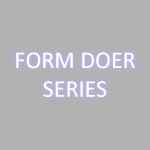
<style>
.page{position:relative;width:150px;height:150px;background:#b2b2b2}
.page>*{position:absolute;margin:0}
.t1{font:24px "Calibri";color:#ffffff;font-variant:small-caps}
</style>
<div class="page">
<p class="t1" style="left:16px;top:52px;width:119px;height:45px;text-align:center">FORM DOER<br>SERIES</p>
</div>
